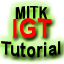
<style>
.page{position:relative;width:64px;height:64px}
.page>*{position:absolute;margin:0}
.t1{font:16px/16px "Arial-BoldMT";letter-spacing:0.025em;color:#000000}
.t2{font:13px/16px "Arial-BoldMT";letter-spacing:0.025em;color:#000000}
.t3{font:22px/16px "Arial-BoldMT";letter-spacing:0.025em;color:#f90505}
</style>
<div class="page">
<p class="t1" style="left:1px;top:6px;width:60px;height:52px;text-align:center"><span class="t2">MITK<br></span><span class="t3">IGT<br></span>Tutorial</p>
</div>
